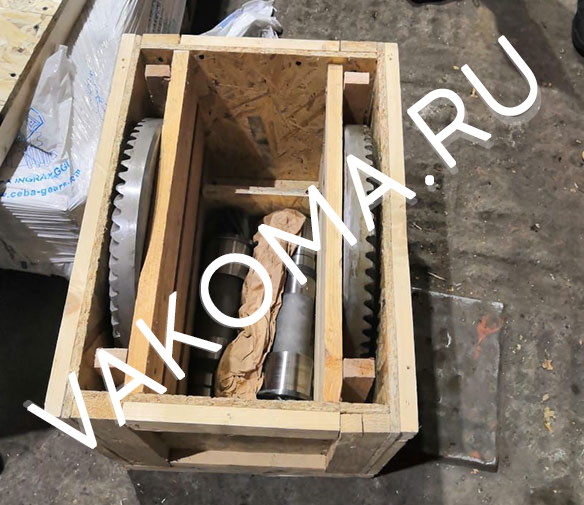
<style>
.page{position:relative;width:584px;height:505px}
.page>*{position:absolute;margin:0}
.t1{font:100px "MADEEvolveSans-Light";letter-spacing:0.05em;color:#ffffff;font-weight:bold}
</style>
<div class="page">
<p class="t1" style="left:27px;top:35px;width:511px;height:414px;rotate:-38deg">VAKOMA.RU</p>
</div>
